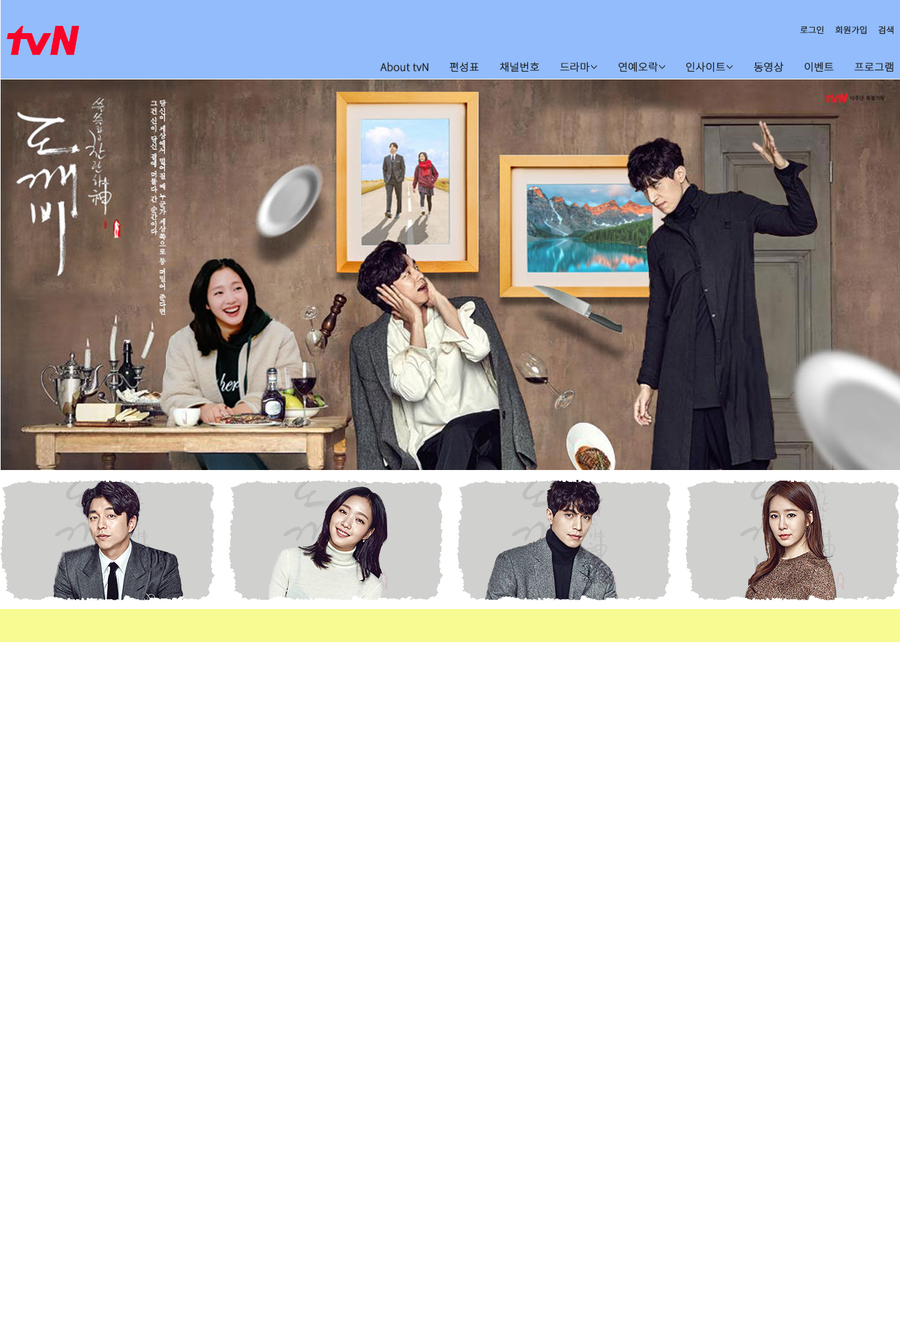
<style>
.page{position:relative;width:900px;height:1324px;background:#ffffff}
.page>*{position:absolute;margin:0}
.t1{font:8.6px "NotoSansKR-Regular";color:#222222;font-weight:bold}
.t2{font:10.6px "NotoSansKR-Regular";color:#222222;font-weight:bold}
</style>
<div class="page">
<p class="t1" style="left:800px;top:26px;width:24px;height:8px">로그인</p>
<p class="t1" style="left:836px;top:26px;width:31px;height:8px">회원가입</p>
<p class="t1" style="left:879px;top:26px;width:15px;height:8px">검색</p>
<p class="t2" style="left:380px;top:62px;width:49px;height:10px">About tvN</p>
<p class="t2" style="left:450px;top:62px;width:29px;height:10px">편성표</p>
<p class="t2" style="left:500px;top:62px;width:40px;height:10px">채널번호</p>
<p class="t2" style="left:560px;top:62px;width:30px;height:10px">드라마</p>
<p class="t2" style="left:618px;top:62px;width:40px;height:10px">연예오락</p>
<p class="t2" style="left:687px;top:62px;width:39px;height:10px">인사이트</p>
<p class="t2" style="left:754px;top:62px;width:30px;height:10px">동영상</p>
<p class="t2" style="left:805px;top:62px;width:29px;height:10px">이벤트</p>
<p class="t2" style="left:855px;top:62px;width:39px;height:10px">프로그램</p>
</div>
